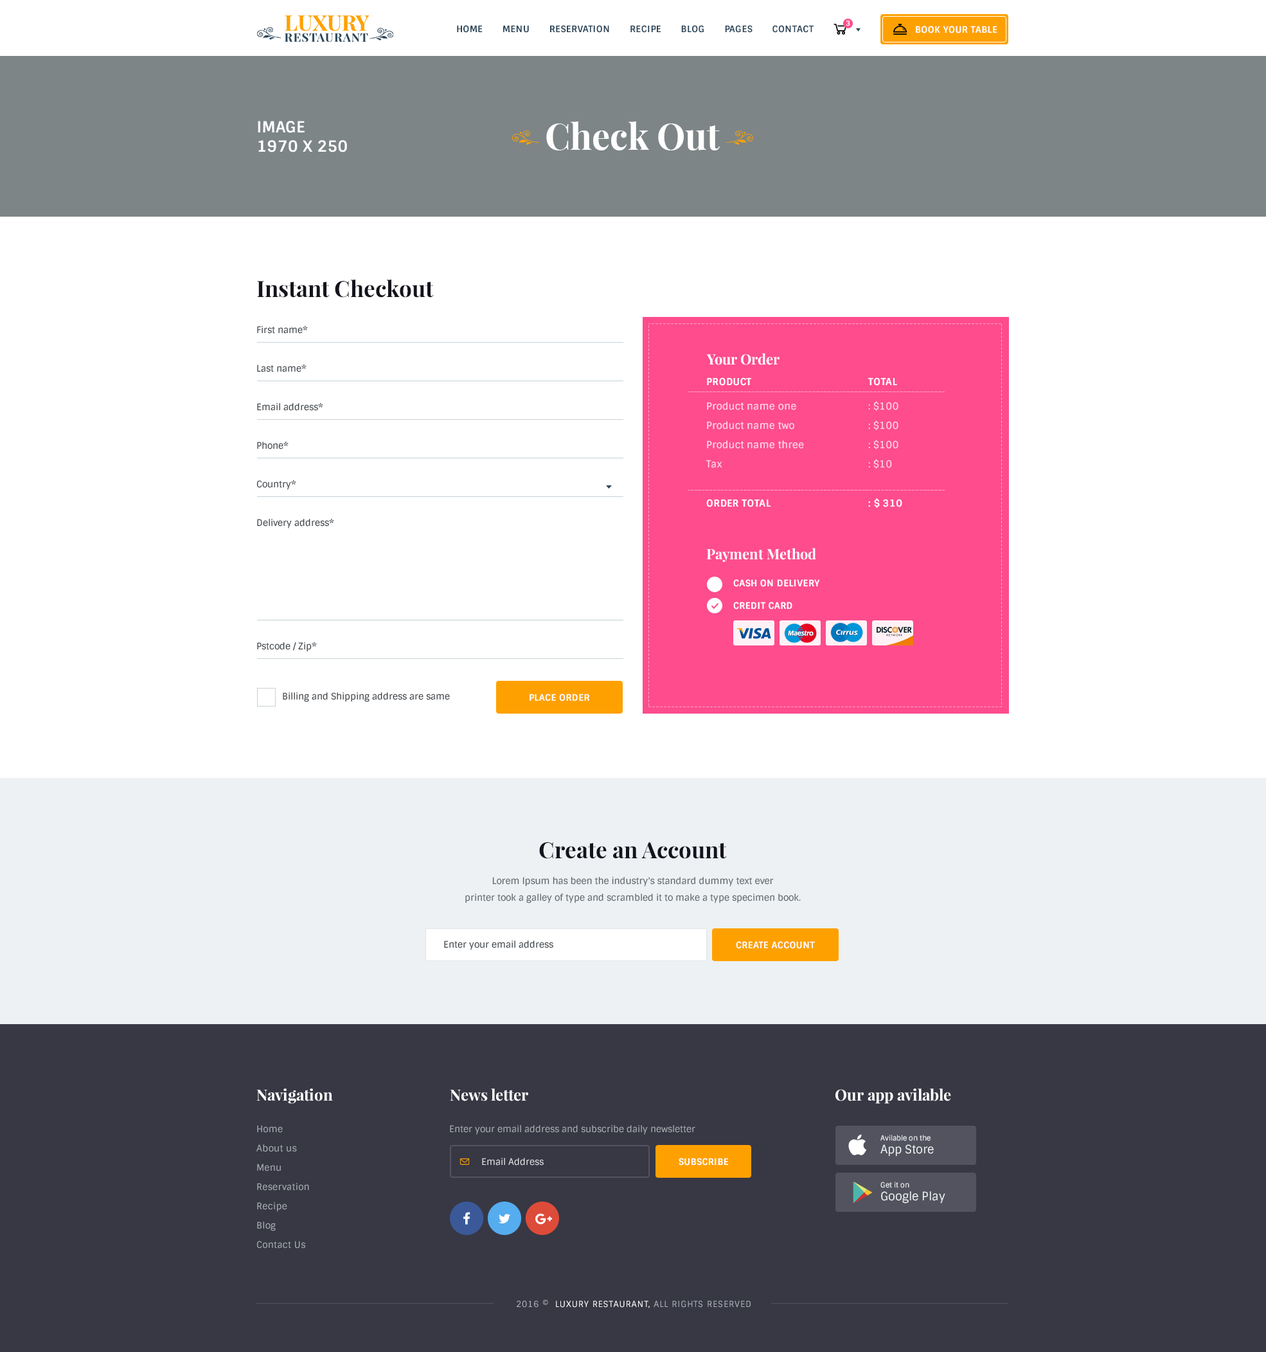
<style>
.page{position:relative;width:1266px;height:1352px;background:#ffffff}
.page>*{position:absolute;margin:0}
.t1{font:9px "Sintony-Bold";letter-spacing:0.025em;color:#2c465a;text-transform:uppercase}
.t2{font:7.1px "Sintony-Bold";letter-spacing:0.025em;color:#ffffff;text-transform:uppercase}
.t3{font:9px "Sintony-Bold";letter-spacing:0.025em;color:#ffffff;text-transform:uppercase}
.t4{font:15.4px/19.3px "Sintony-Bold";letter-spacing:0.005em;color:#ffffff;text-transform:uppercase}
.t5{font:36px "PlayfairDisplay-Bold";color:#ffffff}
.t6{font:22.5px "PlayfairDisplay-Bold";color:#14141d}
.t7{font:9px "Sintony";color:#363d43}
.t8{font:14.1px "PlayfairDisplay-Bold";color:#ffffff}
.t9{font:9.6px "Sintony-Bold";letter-spacing:0.025em;color:#ffffff;text-transform:uppercase}
.t10{font:9.6px/19.3px "Sintony";letter-spacing:0.025em;color:#ffdeea}
.t11{font:9px/16.7px "Sintony";color:#5c6369}
.t12{font:15.4px "PlayfairDisplay-Bold";color:#ffffff}
.t13{font:9px/19.3px "Sintony";letter-spacing:0.025em;color:#adb2b7}
.t14{font:9px "Sintony";color:#adb2b7}
.t15{font:7.1px/12.9px "Sintony";color:#edf1f3}
.t16{font:11.6px/12.9px "Sintony";color:#edf1f3}
.t17{font:9px "Sintony";color:#e6e9eb}
.t18{font:8.4px "Sintony";letter-spacing:0.075em;color:#adb2b7;text-transform:uppercase}
.t19{font:8.4px "Sintony";letter-spacing:0.075em;color:#ffffff;text-transform:uppercase}
</style>
<div class="page">
<p class="t1" style="left:457px;top:25px;width:357px;height:8px">Home       menu       reservation       recipe       blog       Pages       contact</p>
<p class="t2" style="left:846px;top:20px;width:5px;height:6px">3</p>
<p class="t3" style="left:916px;top:26px;width:82px;height:7px">Book your table</p>
<p class="t4" style="left:258px;top:121px;width:89px;height:31px">Image<br>1970 x 250</p>
<p class="t5" style="left:546px;top:121px;width:174px;height:29px">Check Out</p>
<p class="t6" style="left:257px;top:279px;width:177px;height:19px">Instant Checkout</p>
<p class="t7" style="left:257px;top:325px;width:51px;height:9px">First name*</p>
<p class="t8" style="left:706px;top:353px;width:74px;height:12px">Your Order</p>
<p class="t7" style="left:257px;top:364px;width:50px;height:8px">Last name*</p>
<p class="t9" style="left:707px;top:377px;width:190px;height:9px">Product      Total</p>
<p class="t10" style="left:706px;top:401px;width:193px;height:68px">Product name one    : $100<br>Product name two    : $100<br>Product name three   : $100<br>Tax       : $10</p>
<p class="t7" style="left:257px;top:402px;width:66px;height:9px">Email address*</p>
<p class="t7" style="left:257px;top:441px;width:32px;height:8px">Phone*</p>
<p class="t7" style="left:256px;top:480px;width:40px;height:10px">Country*</p>
<p class="t9" style="left:706px;top:498px;width:197px;height:10px">Order Total     : $ 310</p>
<p class="t7" style="left:257px;top:518px;width:77px;height:10px">Delivery address*</p>
<p class="t8" style="left:706px;top:548px;width:110px;height:14px">Payment Method</p>
<p class="t3" style="left:734px;top:579px;width:86px;height:8px">Cash on delivery</p>
<p class="t3" style="left:734px;top:602px;width:59px;height:7px">Credit card</p>
<p class="t7" style="left:257px;top:642px;width:60px;height:10px">Pstcode / Zip*</p>
<p class="t7" style="left:283px;top:692px;width:167px;height:10px">Billing and Shipping address are same</p>
<p class="t3" style="left:530px;top:694px;width:60px;height:7px">Place order</p>
<p class="t6" style="left:539px;top:842px;width:188px;height:17px">Create an Account</p>
<p class="t11" style="left:465px;top:876px;width:336px;height:27px;text-align:center">Lorem Ipsum has been the industry's standard dummy text ever<br>printer took a galley of type and scrambled it to make a type specimen book.</p>
<p class="t7" style="left:444px;top:941px;width:110px;height:9px">Enter your email address</p>
<p class="t3" style="left:736px;top:941px;width:79px;height:8px">Create account</p>
<p class="t12" style="left:256px;top:1088px;width:77px;height:16px">Navigation</p>
<p class="t12" style="left:450px;top:1088px;width:78px;height:13px">News letter</p>
<p class="t12" style="left:836px;top:1088px;width:115px;height:16px">Our app avilable</p>
<p class="t13" style="left:256px;top:1125px;width:53px;height:123px">Home<br>About us<br>Menu<br>Reservation<br>Recipe<br>Blog<br>Contact Us</p>
<p class="t14" style="left:450px;top:1125px;width:246px;height:10px">Enter your email address and subscribe daily newsletter</p>
<p class="t15" style="left:881px;top:1135px;width:53px;height:21px">Avilable on the<br><span class="t16">App Store</span></p>
<p class="t17" style="left:482px;top:1158px;width:62px;height:8px">Email Address</p>
<p class="t3" style="left:679px;top:1158px;width:49px;height:8px">Subscribe</p>
<p class="t16" style="left:881px;top:1182px;width:65px;height:21px"><span class="t15">Get it on<br></span>Google Play</p>
<p class="t18" style="left:517px;top:1299px;width:234px;height:9px">2016 ©  <span class="t19">Luxury RestaurAnt,</span> All rights reserved</p>
</div>
